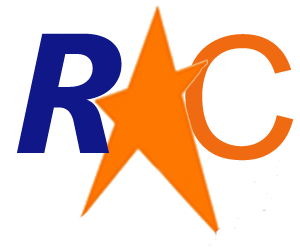
<style>
.page{position:relative;width:300px;height:250px;background:#ffffff}
.page>*{position:absolute;margin:0}
.t1{font:170px "SegoeUI-BoldItalic";color:#101889}
.t2{font:170px "ArialMT";color:#f06a11}
</style>
<div class="page">
<p class="t1" style="left:17px;top:33px;width:105px;height:120px">R</p>
<p class="t2" style="left:185px;top:34px;width:109px;height:127px">C</p>
</div>
